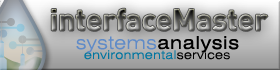
<style>
.page{position:relative;width:280px;height:70px}
.page>*{position:absolute;margin:0}
.t1{font:30px "DIN-Bold"}
.t2{font:18px "Swiss721BT-RomanExtended";letter-spacing:0.04em;color:#000000}
.t3{font:18px "Swiss721BT-LightExtended";letter-spacing:0.04em;color:#608bc7}
.t4{font:12px "Swiss721BT-LightExtended";letter-spacing:0.04em;color:#0075a0}
.t5{font:12px "Swiss721BT-LightExtended";letter-spacing:0.04em;color:#000000}
</style>
<div class="page">
<p class="t1" style="left:51px;top:8px;width:217px;height:23px">interfaceMaster</p>
<p class="t2" style="left:76px;top:36px;width:163px;height:17px"><span class="t3">systems</span>analysis</p>
<p class="t4" style="left:84px;top:50px;width:146px;height:10px">environmental<span class="t5">services</span></p>
</div>
